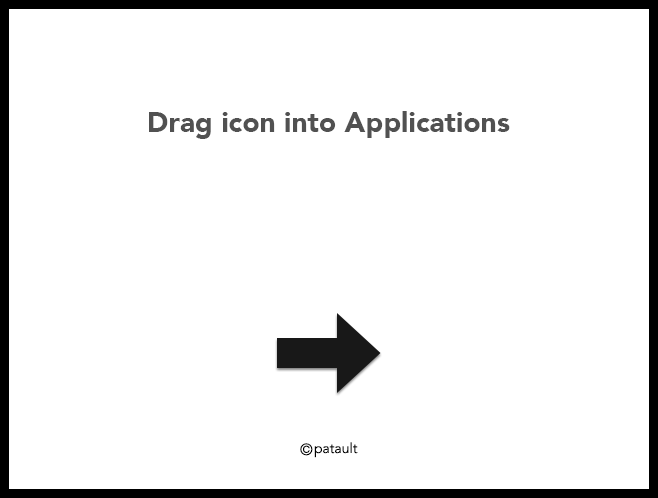
<style>
.page{position:relative;width:658px;height:498px;background:#ffffff}
.page>*{position:absolute;margin:0}
.t1{font:28.2px "Avenir-Black";color:#515151}
.t2{font:16px "Avenir-Book";color:#000000}
.t3{font:14px "Avenir-Book";color:#000000}
</style>
<div class="page">
<p class="t1" style="left:149px;top:111px;width:361px;height:28px">Drag icon into Applications</p>
<p class="t2" style="left:300px;top:443px;width:13px;height:13px">©</p>
<p class="t3" style="left:314px;top:442px;width:44px;height:16px">patault</p>
</div>
